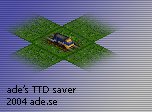
<style>
.page{position:relative;width:152px;height:112px}
.page>*{position:absolute;margin:0}
.t1{font:10px "Tahoma";color:#000000}
</style>
<div class="page">
<p class="t1" style="left:7px;top:85px;width:69px;height:20px">ade’s TTD saver<br>2004 ade.se</p>
</div>
